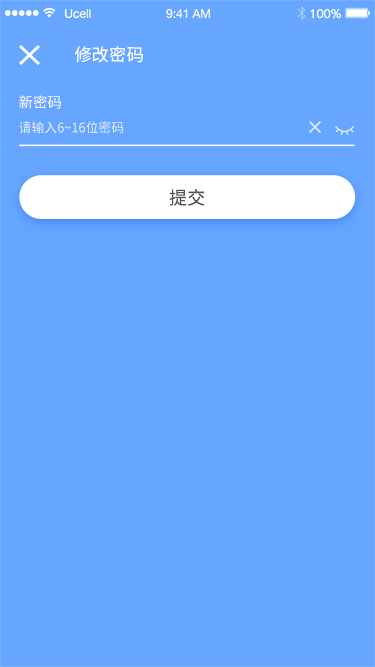
<style>
.page{position:relative;width:375px;height:667px;background:#66a6ff}
.page>*{position:absolute;margin:0}
.t1{font:17.4px "NotoSansHans-Regular";color:#ffffff}
.t2{font:14.6px "NotoSansHans-Regular";color:#ffffff;text-transform:uppercase}
.t3{font:12.9px "NotoSansHans-Regular";color:#e6efff;text-transform:uppercase}
.t4{font:17.9px "NotoSansHans-Regular";letter-spacing:0.02em;color:#535353}
</style>
<div class="page">
<p class="t1" style="left:74px;top:46px;width:69px;height:17px">修改密码</p>
<p class="t2" style="left:19px;top:95px;width:42px;height:14px">新密码</p>
<p class="t3" style="left:19px;top:121px;width:105px;height:13px">请输入6~16位密码</p>
<p class="t4" style="left:169px;top:189px;width:36px;height:17px">提交</p>
</div>
